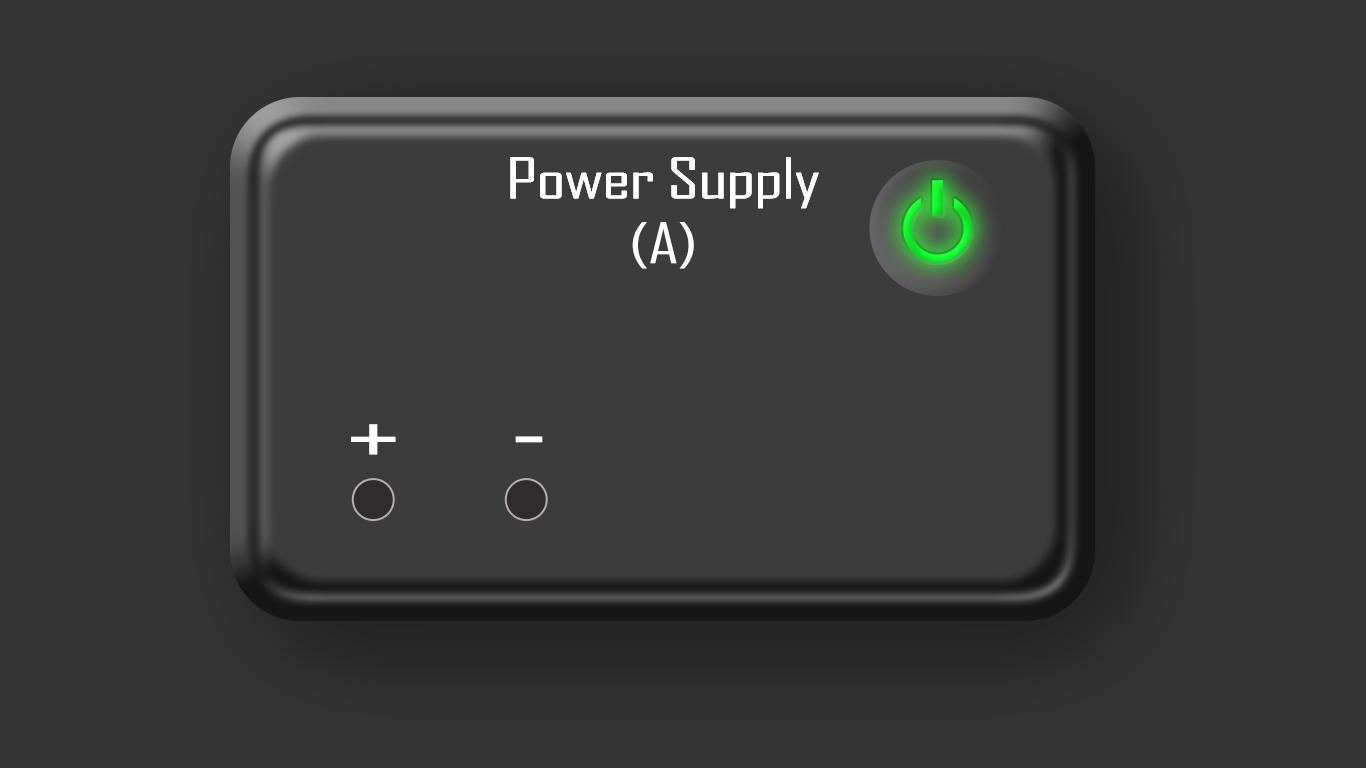
<style>
.page{position:relative;width:1366px;height:768px;background:#333333}
.page>*{position:absolute;margin:0}
.t1{font:54px "AgencyFB-Reg";letter-spacing:-0.02em;color:#ffffff;scale:1.44 1}
</style>
<div class="page">
<p class="t1" style="left:510px;top:157px;width:309px;height:112px;text-align:center">Power Supply<br>(A)</p>
</div>
